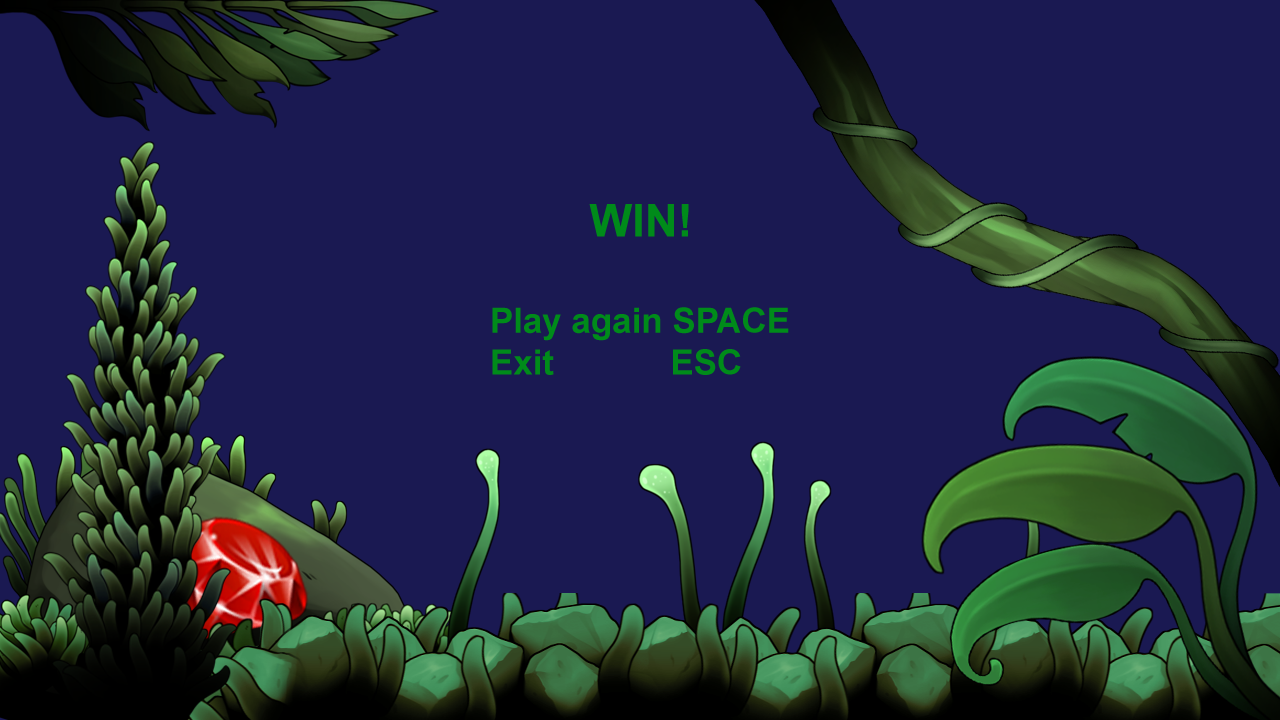
<style>
.page{position:relative;width:1280px;height:720px;background:#1a1952}
.page>*{position:absolute;margin:0}
.t1{font:34.9px "Arial-BoldMT";color:#008b1a}
.t2{font:45.3px "Arial-BoldMT";color:#008b1a}
</style>
<div class="page">
<p class="t1" style="left:492px;top:204px;width:297px;height:171px;text-align:center"><span class="t2">WIN!<br><br></span>Play again SPACE<br>Exit            ESC</p>
</div>
